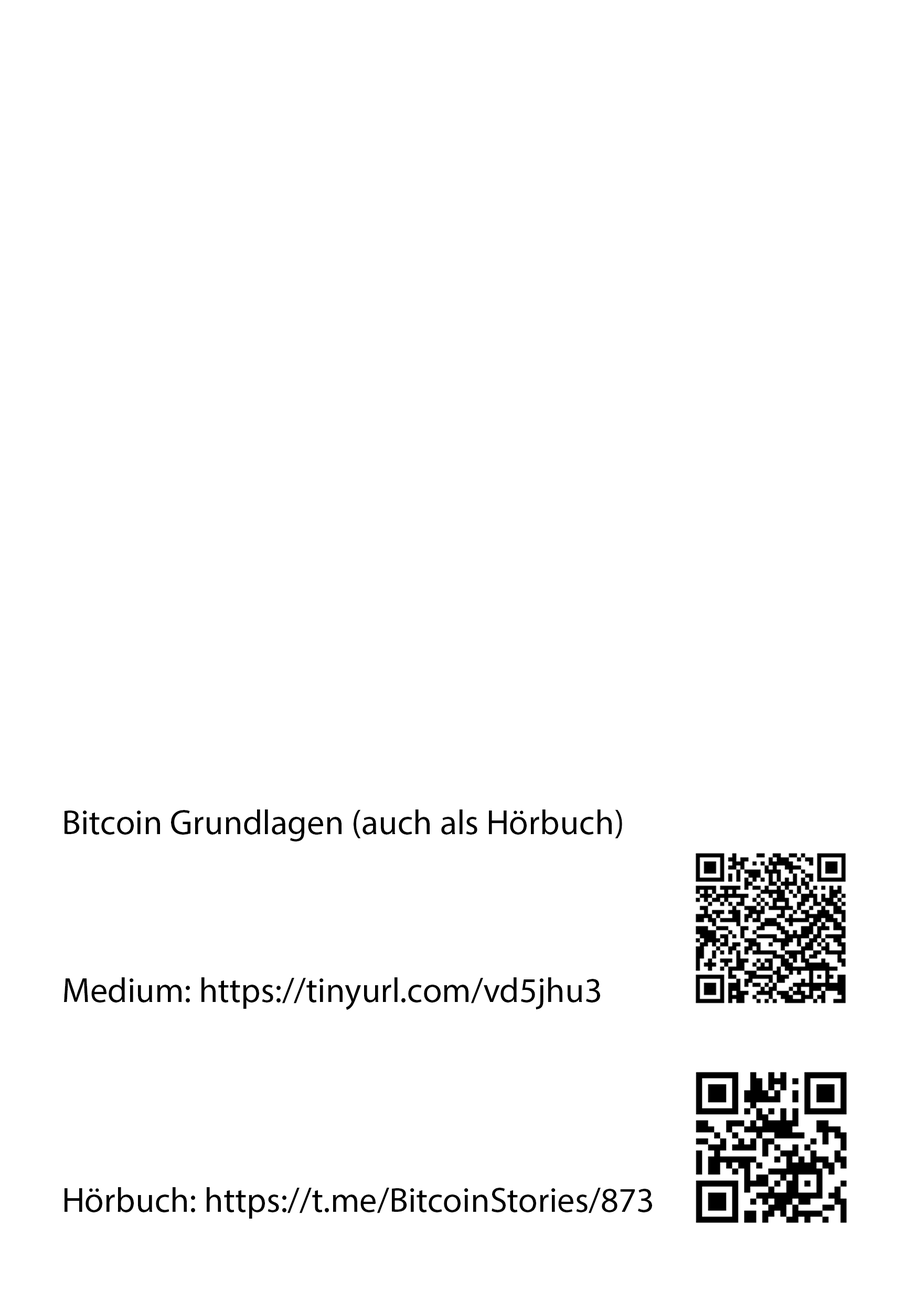
<style>
.page{position:relative;width:917px;height:1301px;background:#ffffff}
.page>*{position:absolute;margin:0}
.t1{font:35px "MyriadPro-Regular";color:#000000}
</style>
<div class="page">
<p class="t1" style="left:64px;top:809px;width:588px;height:409px">Bitcoin Grundlagen (auch als Hörbuch)<br><br><br><br>Medium: https://tinyurl.com/vd5jhu3<br><br><br><br><br>Hörbuch: https://t.me/BitcoinStories/873</p>
</div>
